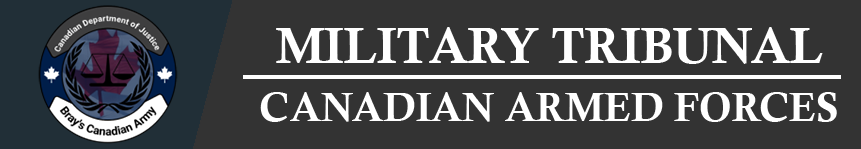
<style>
.page{position:relative;width:861px;height:149px;background:#333333}
.page>*{position:absolute;margin:0}
.t1{font:50px "CalisMTBol";color:#ffffff}
.t2{font:40px "CalisMTBol";color:#ffffff}
</style>
<div class="page">
<p class="t1" style="left:276px;top:27px;width:547px;height:37px">MILITARY TRIBUNAL</p>
<p class="t2" style="left:260px;top:92px;width:577px;height:30px">CANADIAN ARMED FORCES</p>
</div>
